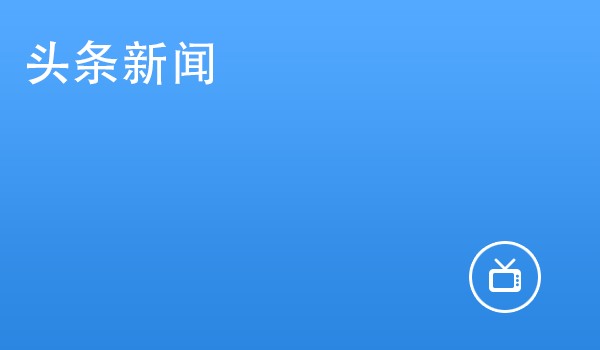
<style>
.page{position:relative;width:600px;height:350px}
.page>*{position:absolute;margin:0}
.t1{font:48px "AdobeHeitiStd-Regular";letter-spacing:0.02em;color:#ffffff;text-transform:uppercase}
</style>
<div class="page">
<p class="t1" style="left:27px;top:40px;width:187px;height:45px">头条新闻</p>
</div>
